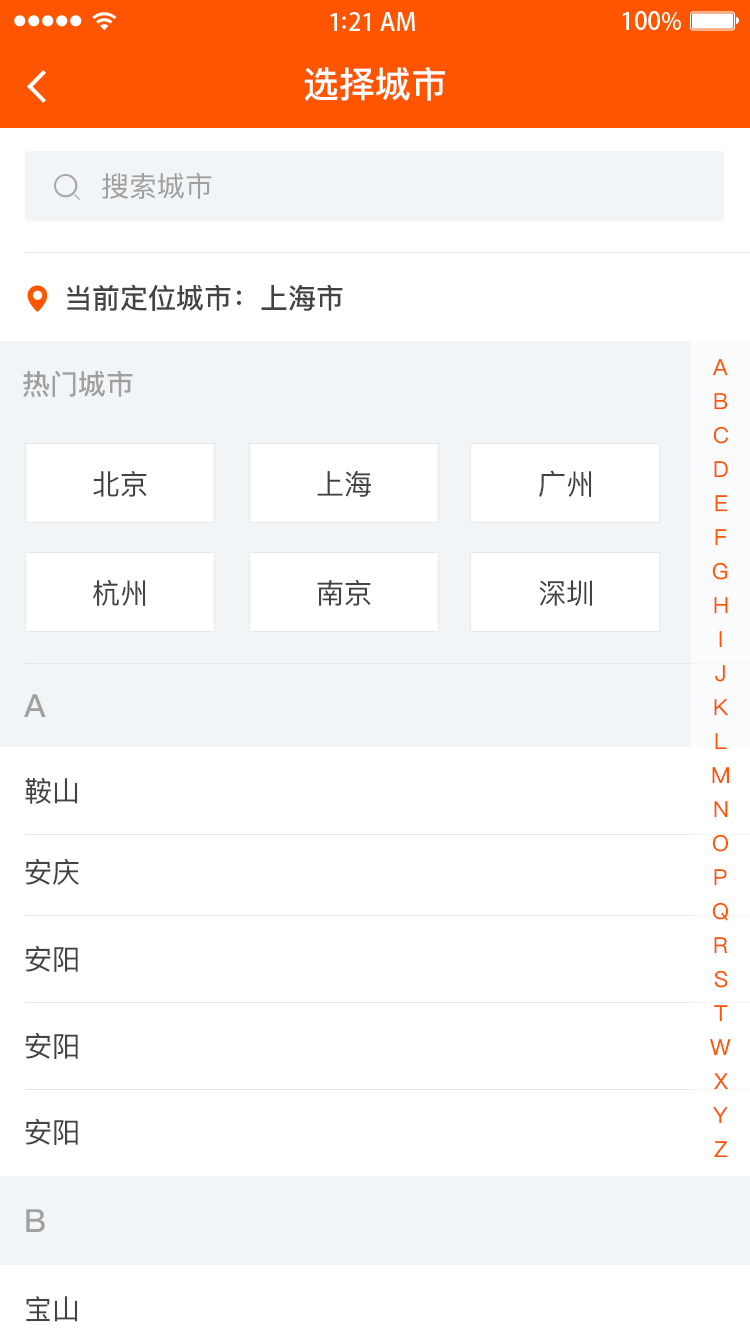
<style>
.page{position:relative;width:750px;height:1334px;background:#ffffff}
.page>*{position:absolute;margin:0}
.t1{font:36px "PingFangSC-Medium";color:#ffffff}
.t2{font:28px "PingFangSC-Regular";color:#a0a0a0}
.t3{font:28px "PingFangSC-Medium";color:#434343}
.t4{font:22px/38px "PingFangSC-Regular";color:#ff5400}
.t5{font:28px "PingFangSC-Medium";color:#a0a0a0}
.t6{font:28px "PingFangSC-Regular";color:#434343}
.t7{font:32px "PingFangSC-Medium";color:#a0a0a0}
</style>
<div class="page">
<p class="t1" style="left:304px;top:67px;width:141px;height:34px">选择城市</p>
<p class="t2" style="left:102px;top:172px;width:110px;height:27px">搜索城市</p>
<p class="t3" style="left:67px;top:284px;width:276px;height:27px">当前定位城市：上海市</p>
<p class="t4" style="left:710px;top:359px;width:21px;height:799px;text-align:center">A<br>B<br>C<br>D<br>E<br>F<br>G<br>H<br>I<br>J<br>K<br>L<br>M<br>N<br>O<br>P<br>Q<br>R<br>S<br>T<br>W<br>X<br>Y<br>Z</p>
<p class="t5" style="left:23px;top:370px;width:110px;height:27px">热门城市</p>
<p class="t6" style="left:93px;top:471px;width:54px;height:26px">北京</p>
<p class="t6" style="left:317px;top:470px;width:54px;height:27px">上海</p>
<p class="t6" style="left:539px;top:470px;width:53px;height:27px">广州</p>
<p class="t6" style="left:93px;top:580px;width:53px;height:26px">杭州</p>
<p class="t6" style="left:317px;top:580px;width:54px;height:26px">南京</p>
<p class="t6" style="left:539px;top:580px;width:53px;height:26px">深圳</p>
<p class="t7" style="left:24px;top:694px;width:22px;height:23px">A</p>
<p class="t6" style="left:25px;top:777px;width:53px;height:27px">鞍山</p>
<p class="t6" style="left:25px;top:858px;width:54px;height:27px">安庆</p>
<p class="t6" style="left:25px;top:945px;width:53px;height:27px">安阳</p>
<p class="t6" style="left:25px;top:1032px;width:53px;height:27px">安阳</p>
<p class="t6" style="left:25px;top:1118px;width:53px;height:27px">安阳</p>
<p class="t7" style="left:26px;top:1209px;width:19px;height:23px">B</p>
<p class="t6" style="left:26px;top:1296px;width:52px;height:26px">宝山</p>
</div>
